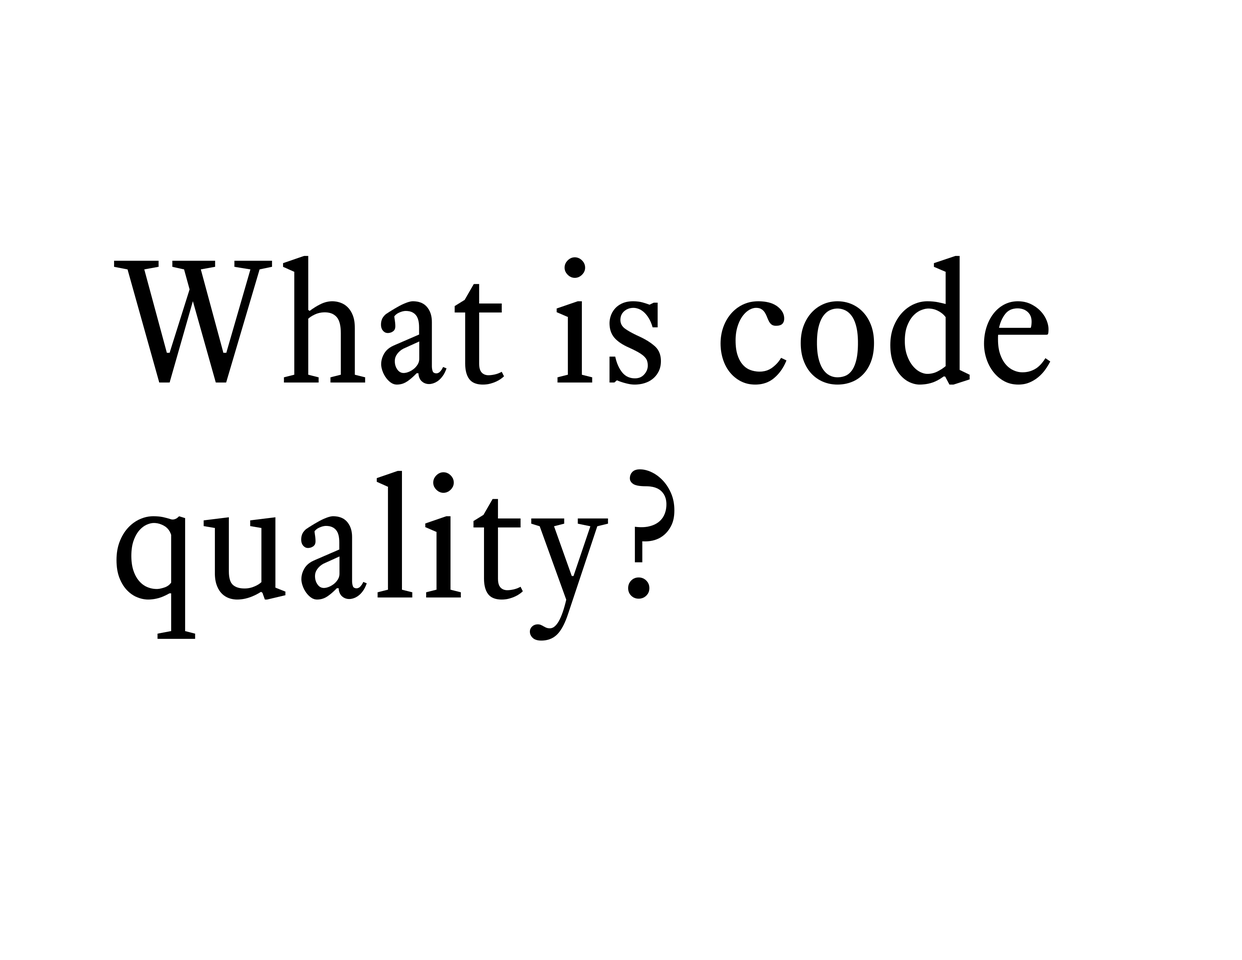
<style>
.page{position:relative;width:1242px;height:960px;background:#ffffff}
.page>*{position:absolute;margin:0}
.t1{font:172.5px/214.9px "EquityTextB";letter-spacing:0.025em;color:#000000}
</style>
<div class="page">
<p class="t1" style="left:114px;top:256px;width:937px;height:385px">What is code<br>quality?</p>
</div>
